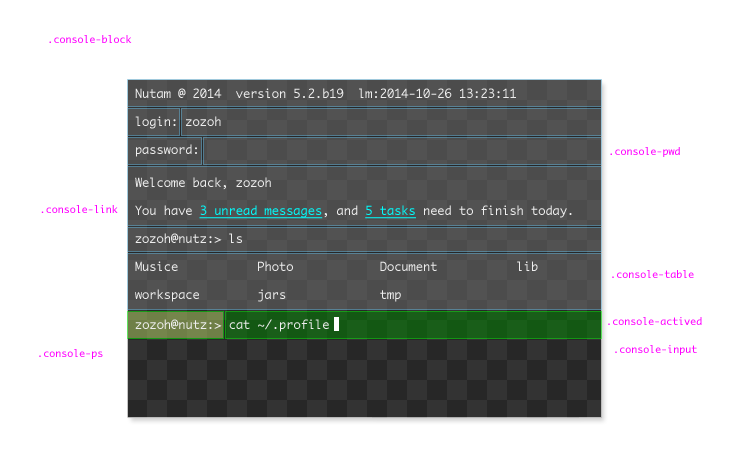
<style>
.page{position:relative;width:730px;height:458px;background:#ffffff}
.page>*{position:absolute;margin:0}
.t1{font:10px "Monaco";color:#ff00ff}
.t2{font:12px/28px "Monaco";color:#eeeeee}
.t3{font:12px/28px "Monaco";color:#00ffff;text-decoration:underline}
.t4{font:12px "Monaco";color:#eeeeee}
</style>
<div class="page">
<p class="t1" style="left:49px;top:35px;width:83px;height:8px">.console-block</p>
<p class="t2" style="left:135px;top:88px;width:381px;height:69px">Nutam @ 2014  version 5.2.b19  lm:2014-10-26 13:23:11<br>login: zozoh<br>password:</p>
<p class="t1" style="left:610px;top:147px;width:70px;height:10px">.console-pwd</p>
<p class="t2" style="left:135px;top:177px;width:437px;height:125px">Welcome back, zozoh<br>You have <span class="t3">3 unread messages</span>, and <span class="t3">5 tasks</span> need to finish today.<br>zozoh@nutz:&gt; ls<br>Musice           Photo            Document           lib<br>workspace        jars             tmp</p>
<p class="t1" style="left:41px;top:205px;width:77px;height:8px">.console-link</p>
<p class="t1" style="left:612px;top:270px;width:82px;height:8px">.console-table</p>
<p class="t1" style="left:608px;top:317px;width:94px;height:8px">.console-actived</p>
<p class="t4" style="left:135px;top:319px;width:194px;height:13px">zozoh@nutz:&gt; cat ~/.profile</p>
<p class="t1" style="left:39px;top:349px;width:64px;height:10px">.console-ps</p>
<p class="t1" style="left:615px;top:345px;width:82px;height:10px">.console-input</p>
</div>
